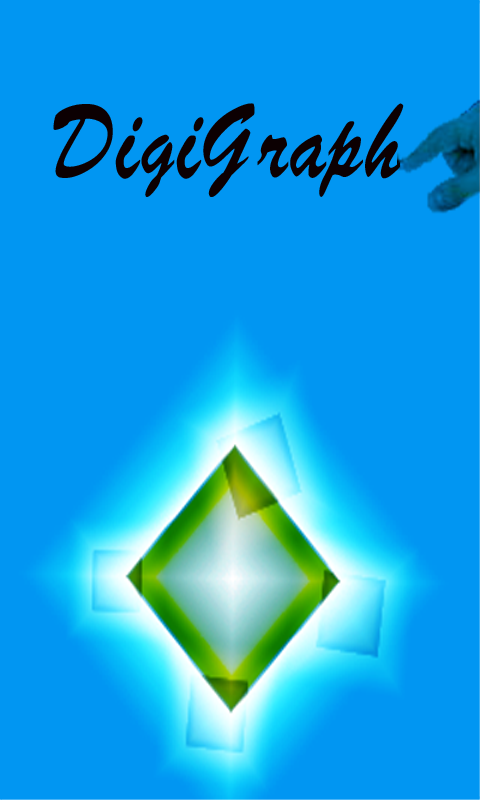
<style>
.page{position:relative;width:480px;height:800px;background:#0196f2}
.page>*{position:absolute;margin:0}
.t1{font:93.8px "Brussels";color:#0c0002;scale:0.8 1}
</style>
<div class="page">
<p class="t1" style="left:53px;top:103px;width:351px;height:94px">DigiGraph</p>
</div>
